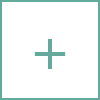
<style>
.page{position:relative;width:100px;height:100px;background:#ffffff}
.page>*{position:absolute;margin:0}
.t1{font:60px "HelveticaNeue";color:#63aa9c}
</style>
<div class="page">
<p class="t1" style="left:34px;top:39px;width:32px;height:30px">+</p>
</div>
